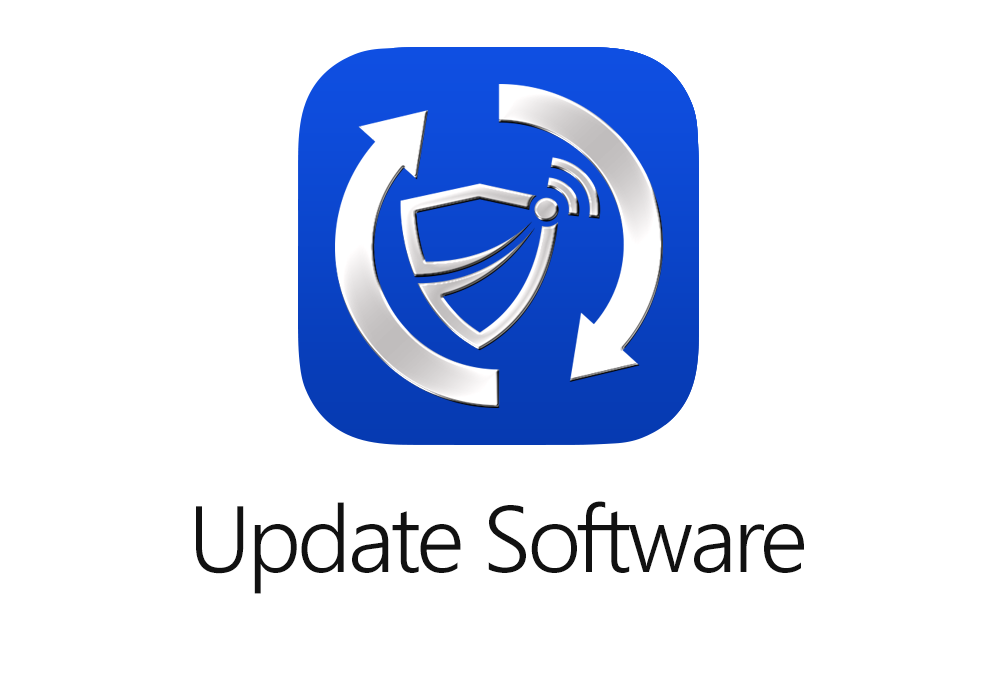
<style>
.page{position:relative;width:1000px;height:700px;background:#ffffff}
.page>*{position:absolute;margin:0}
.t1{font:94px "SegoeUI-Semilight";letter-spacing:-0.04em;color:#111111}
</style>
<div class="page">
<p class="t1" style="left:196px;top:501px;width:608px;height:93px">Update Software</p>
</div>
